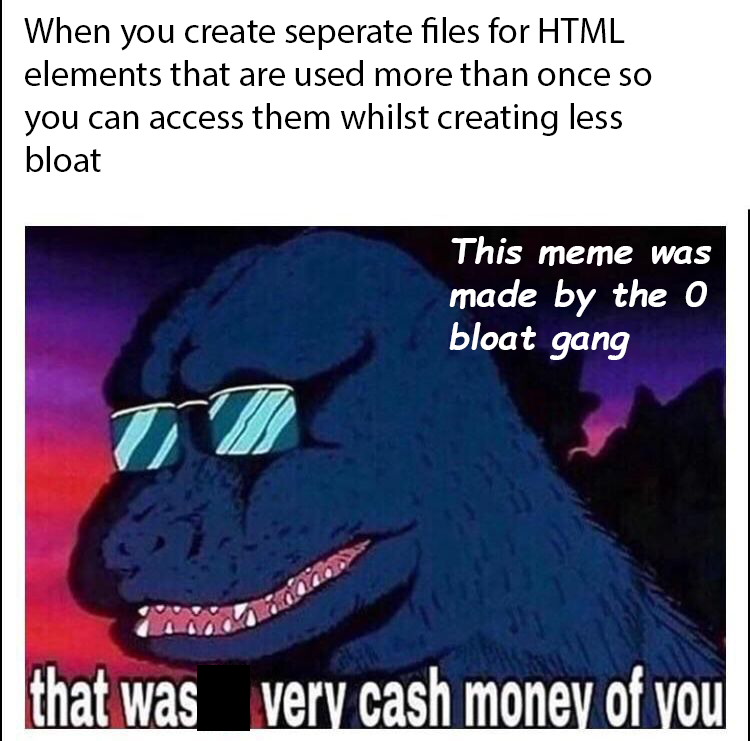
<style>
.page{position:relative;width:750px;height:741px;background:#ffffff}
.page>*{position:absolute;margin:0}
.t1{font:36px "MyriadPro-Regular";color:#000000}
.t2{font:36px "ComicSansMS-BoldItalic";color:#ffffff}
</style>
<div class="page">
<p class="t1" style="left:24px;top:17px;width:628px;height:155px">When you create seperate files for HTML elements that are used more than once so you can access them whilst creating less bloat</p>
<p class="t2" style="left:449px;top:236px;width:263px;height:124px">This meme was made by the 0 bloat gang</p>
</div>
